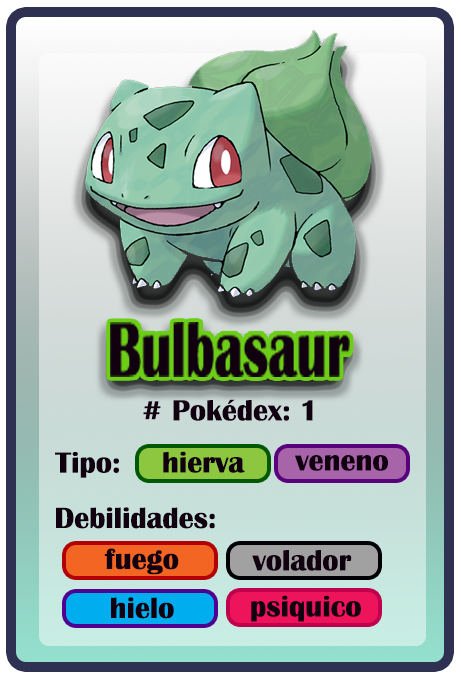
<style>
.page{position:relative;width:461px;height:682px}
.page>*{position:absolute;margin:0}
.t1{font:30px "BritannicBold";color:#100010}
</style>
<div class="page">
<p class="t1" style="left:143px;top:399px;width:170px;height:22px"># Pokédex: 1</p>
<p class="t1" style="left:55px;top:452px;width:64px;height:26px">Tipo:</p>
<p class="t1" style="left:163px;top:451px;width:82px;height:22px">hierva</p>
<p class="t1" style="left:295px;top:455px;width:93px;height:16px">veneno</p>
<p class="t1" style="left:56px;top:507px;width:159px;height:22px">Debilidades:</p>
<p class="t1" style="left:104px;top:548px;width:75px;height:27px">fuego</p>
<p class="t1" style="left:252px;top:550px;width:100px;height:21px">volador</p>
<p class="t1" style="left:111px;top:597px;width:63px;height:22px">hielo</p>
<p class="t1" style="left:251px;top:595px;width:110px;height:27px">psiquico</p>
</div>
